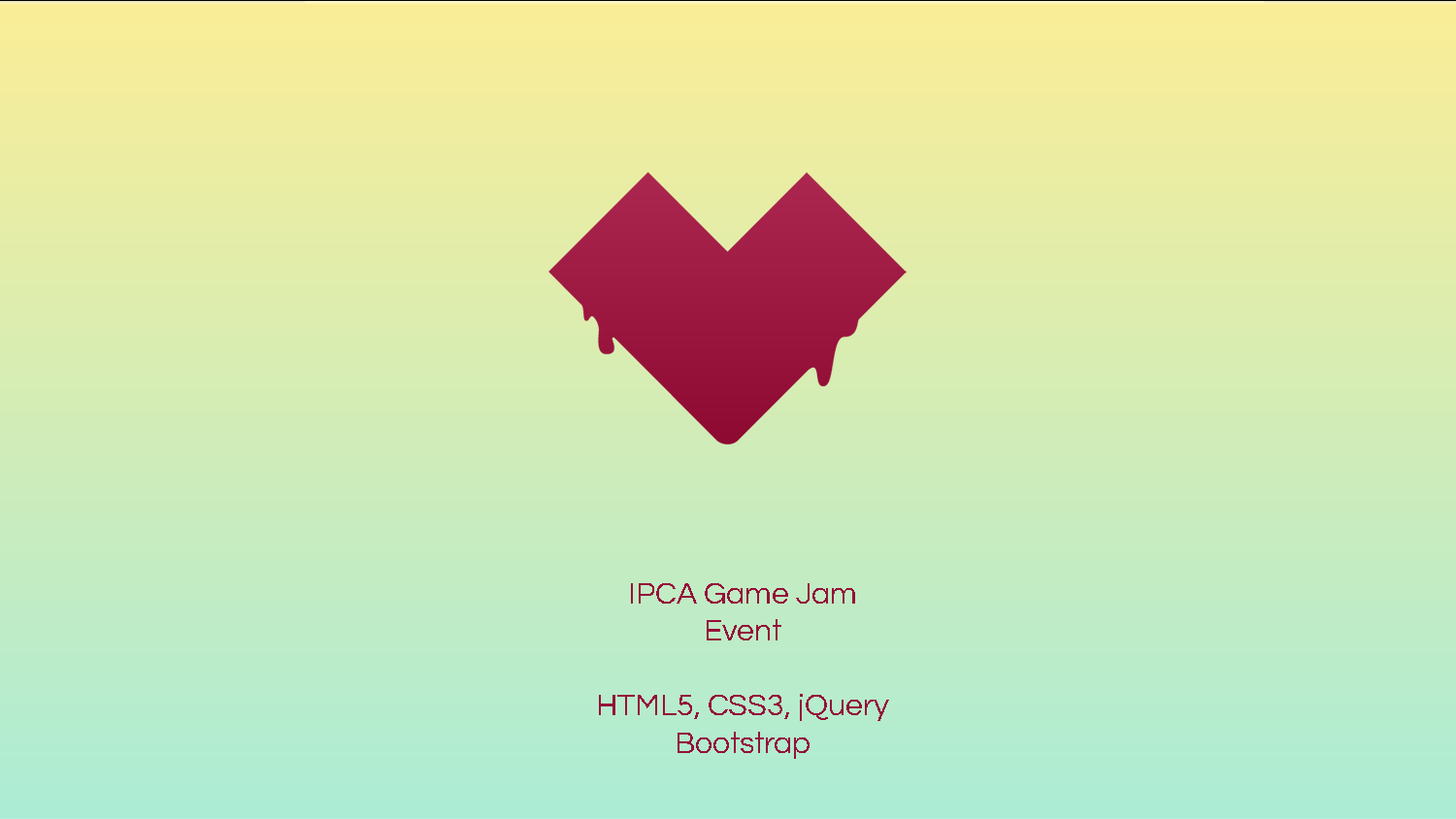
<style>
.page{position:relative;width:1456px;height:819px}
.page>*{position:absolute;margin:0}
.t1{font:31.1px "Questrial-Regular";color:#951139}
</style>
<div class="page">
<p class="t1" style="left:599px;top:583px;width:290px;height:176px;text-align:center">IPCA Game Jam<br>Event<br><br>HTML5, CSS3, jQuery<br>Bootstrap</p>
</div>
